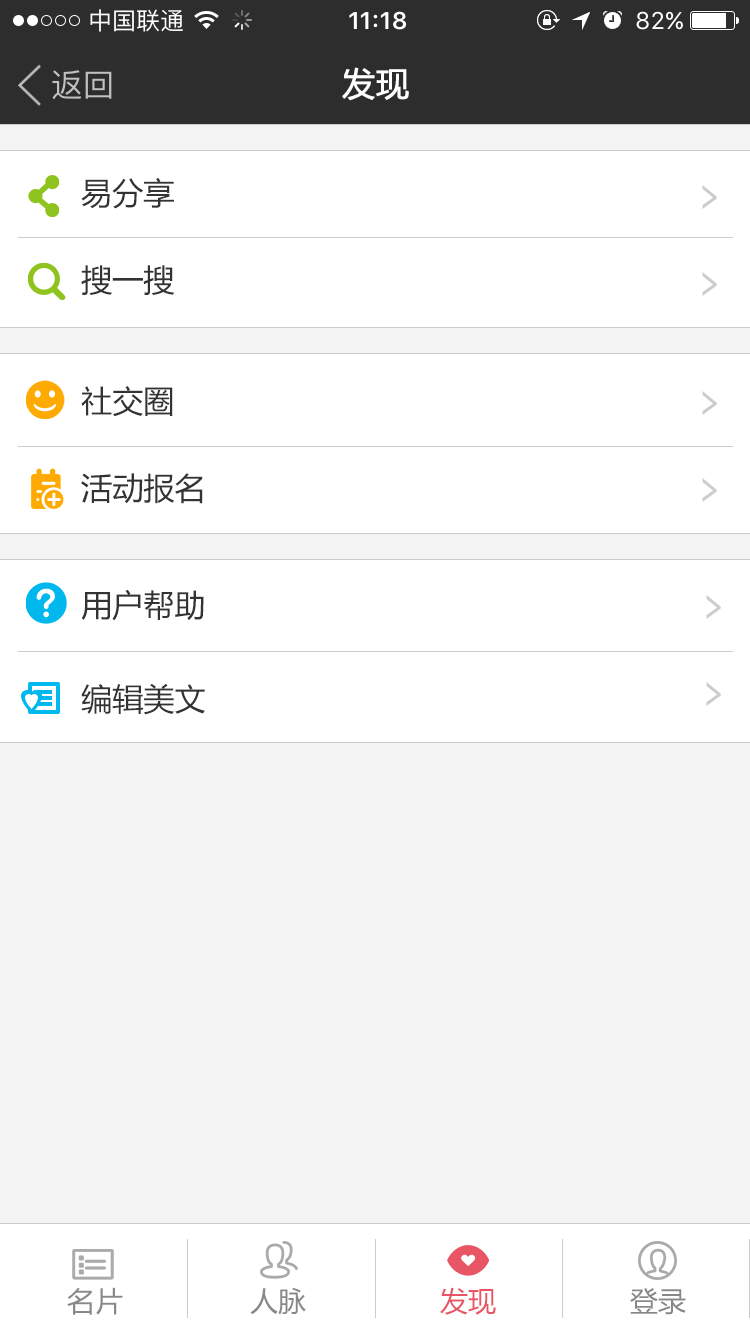
<style>
.page{position:relative;width:750px;height:1334px;background:#ffffff}
.page>*{position:absolute;margin:0}
.t1{font:33px "MicrosoftYaHei";color:#ffffff;font-weight:bold}
.t2{font:31px/87px "MicrosoftYaHei";color:#333333}
.t3{font:46.5px/87px "MicrosoftYaHei";color:#cccccc;scale:0.67 1}
.t4{font:31px "MicrosoftYaHei";color:#333333}
.t5{font:28px "MicrosoftYaHei";color:#888888}
.t6{font:28px "MicrosoftYaHei";color:#e85565}
</style>
<div class="page">
<p class="t1" style="left:342px;top:67px;width:67px;height:34px">发现</p>
<p class="t2" style="left:81px;top:177px;width:94px;height:118px">易分享<br>搜一搜</p>
<p class="t3" style="left:702px;top:185px;width:15px;height:111px;text-align:right">&gt;<br>&gt;</p>
<p class="t2" style="left:81px;top:386px;width:122px;height:118px">社交圈<br>活动报名</p>
<p class="t3" style="left:702px;top:391px;width:15px;height:111px;text-align:right">&gt;<br>&gt;</p>
<p class="t4" style="left:81px;top:589px;width:123px;height:32px">用户帮助</p>
<p class="t3" style="left:706px;top:595px;width:15px;height:111px;text-align:right">&gt;<br>&gt;</p>
<p class="t4" style="left:81px;top:683px;width:124px;height:32px">编辑美文</p>
<p class="t5" style="left:67px;top:1287px;width:56px;height:28px">名片</p>
<p class="t5" style="left:250px;top:1287px;width:56px;height:28px">人脉</p>
<p class="t6" style="left:440px;top:1287px;width:56px;height:28px">发现</p>
<p class="t5" style="left:630px;top:1288px;width:56px;height:27px">登录</p>
</div>
